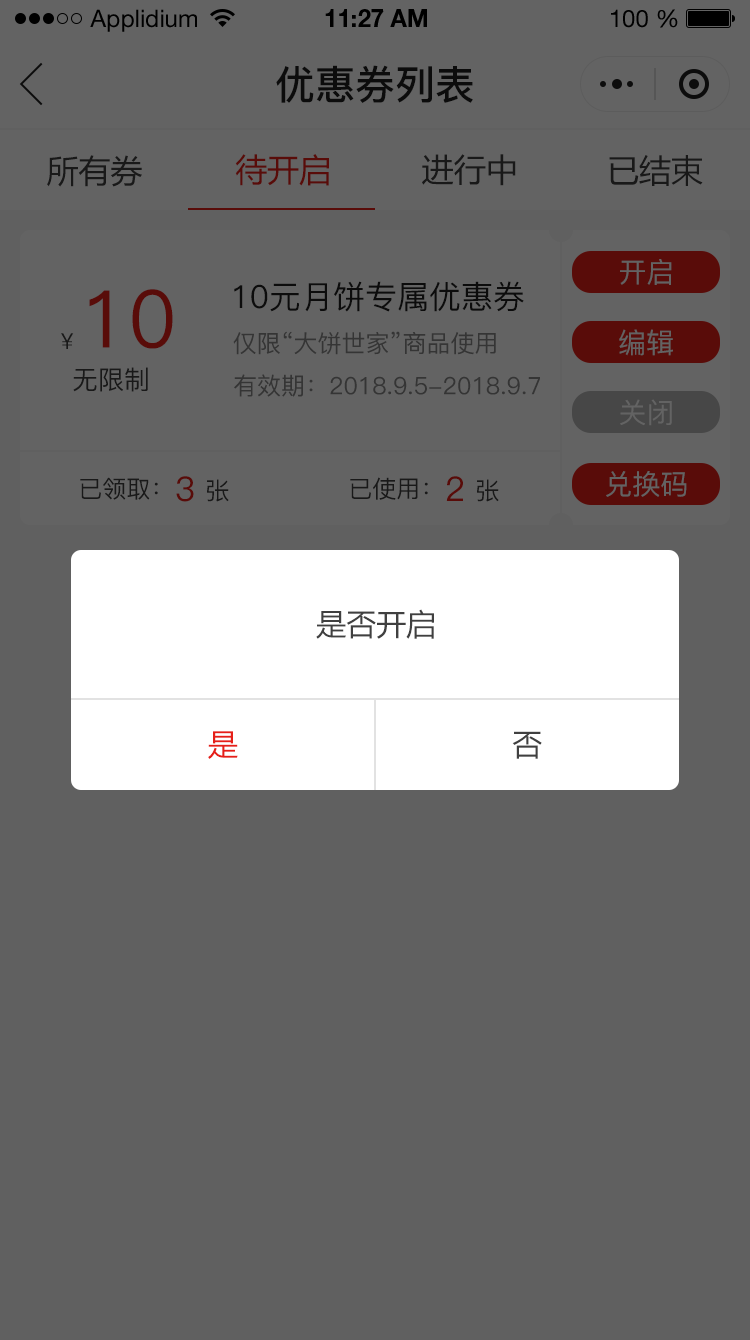
<style>
.page{position:relative;width:750px;height:1340px;background:#606060}
.page>*{position:absolute;margin:0}
.t1{font:24px "HelveticaNeueLTStd-Roman";color:#000000}
.t2{font:24px "HelveticaNeueLTStd-Bd";color:#000000}
.t3{font:40px "PingFang-SC-Bold";color:#202020;text-transform:uppercase}
.t4{font:32px "MicrosoftYaHei";color:#191919;text-transform:uppercase}
.t5{font:32px "MicrosoftYaHei";color:#590c09;text-transform:uppercase}
.t6{font:28px "PingFang-SC-Medium";color:#636363;text-transform:uppercase}
.t7{font:32px "PingFang-SC-Medium";color:#202020;text-transform:uppercase}
.t8{font:80px "PingFang-SC-Medium";color:#590c09;text-transform:uppercase}
.t9{font:22px "PingFang-SC-Medium";color:#191919;text-transform:uppercase}
.t10{font:24px "PingFang-SC-Medium";color:#353535;text-transform:uppercase}
.t11{font:26px "PingFang-SC-Medium";color:#191919;text-transform:uppercase}
.t12{font:24px "PingFang-SC-Medium";color:#191919;text-transform:uppercase}
.t13{font:34px "PingFang-SC-Medium";color:#590c09;text-transform:uppercase}
.t14{font:30px "MicrosoftYaHei";color:#404040;text-transform:uppercase}
.t15{font:30px "MicrosoftYaHei";color:#e61f18;text-transform:uppercase}
</style>
<div class="page">
<p class="t1" style="left:90px;top:9px;width:107px;height:23px">Applidium</p>
<p class="t2" style="left:325px;top:9px;width:102px;height:18px">11:27 AM</p>
<p class="t1" style="left:611px;top:9px;width:67px;height:19px">100 %</p>
<p class="t3" style="left:276px;top:65px;width:197px;height:38px">优惠券列表</p>
<p class="t4" style="left:47px;top:155px;width:95px;height:32px">所有券</p>
<p class="t5" style="left:235px;top:154px;width:94px;height:32px">待开启</p>
<p class="t4" style="left:422px;top:154px;width:94px;height:32px">进行中</p>
<p class="t4" style="left:609px;top:155px;width:94px;height:31px">已结束</p>
<p class="t6" style="left:620px;top:259px;width:52px;height:26px">开启</p>
<p class="t7" style="left:234px;top:281px;width:290px;height:31px">10元月饼专属优惠券</p>
<p class="t8" style="left:89px;top:289px;width:84px;height:60px">10</p>
<p class="t6" style="left:619px;top:329px;width:54px;height:27px">编辑</p>
<p class="t9" style="left:61px;top:333px;width:13px;height:16px">¥</p>
<p class="t10" style="left:233px;top:331px;width:263px;height:24px">仅限“大饼世家”商品使用</p>
<p class="t11" style="left:73px;top:367px;width:75px;height:25px">无限制</p>
<p class="t10" style="left:234px;top:374px;width:306px;height:23px">有效期：2018.9.5-2018.9.7</p>
<p class="t6" style="left:620px;top:399px;width:52px;height:27px">关闭</p>
<p class="t6" style="left:606px;top:471px;width:81px;height:26px">兑换码</p>
<p class="t12" style="left:80px;top:477px;width:78px;height:23px">已领取：</p>
<p class="t13" style="left:176px;top:476px;width:18px;height:26px">3</p>
<p class="t12" style="left:207px;top:479px;width:22px;height:23px">张</p>
<p class="t12" style="left:350px;top:477px;width:78px;height:23px">已使用：</p>
<p class="t13" style="left:446px;top:476px;width:17px;height:25px">2</p>
<p class="t12" style="left:477px;top:479px;width:22px;height:23px">张</p>
<p class="t14" style="left:316px;top:609px;width:118px;height:30px">是否开启</p>
<p class="t15" style="left:208px;top:731px;width:30px;height:28px">是</p>
<p class="t14" style="left:512px;top:731px;width:30px;height:28px">否</p>
</div>
